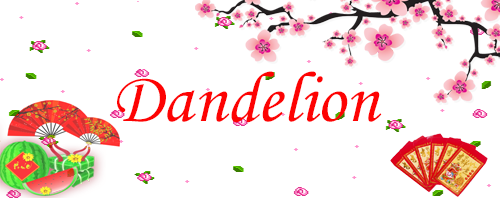
<style>
.page{position:relative;width:500px;height:200px;background:#ffffff}
.page>*{position:absolute;margin:0}
.t1{font:72px "MonotypeCorsiva";color:#fd0303}
</style>
<div class="page">
<p class="t1" style="left:117px;top:71px;width:265px;height:52px">Dandelion</p>
</div>
